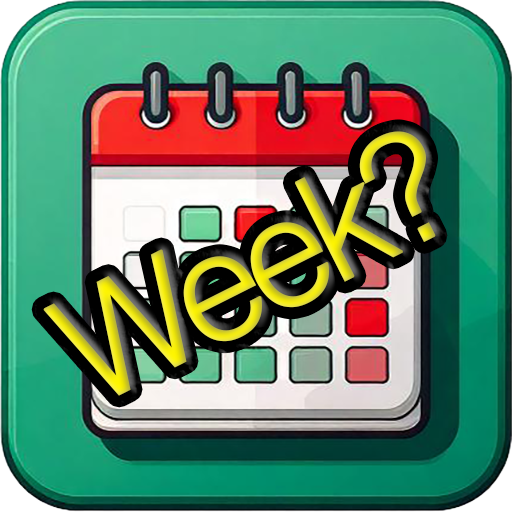
<style>
.page{position:relative;width:512px;height:512px}
.page>*{position:absolute;margin:0}
.t1{font:152.1px "Helvetica-Light";letter-spacing:-0.09em;font-weight:bold}
</style>
<div class="page">
<p class="t1" style="left:43px;top:131px;width:393px;height:265px;rotate:-27deg">Week?</p>
</div>
